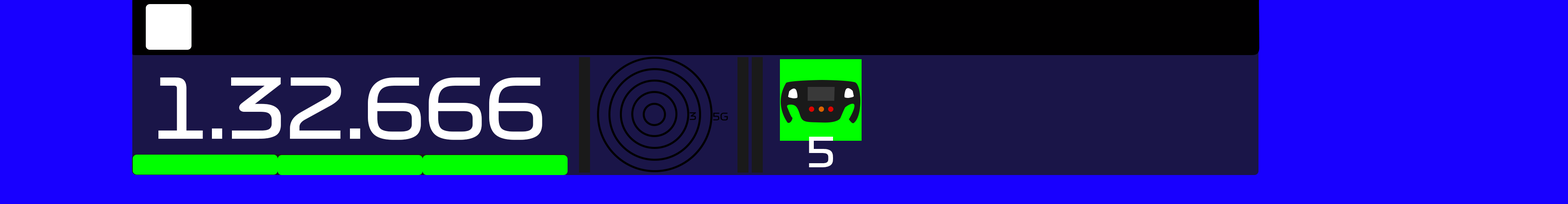
<style>
.page{position:relative;width:1568px;height:204px;background:#1800ff}
.page>*{position:absolute;margin:0}
.t1{font:81.7px "Formula1-Display-Regular";color:#ffffff}
.t2{font:10.2px "Formula1-Display-Regular";color:#010001}
.t3{font:40.8px "Formula1-Display-Regular";color:#ffffff}
</style>
<div class="page">
<p class="t1" style="left:158px;top:77px;width:384px;height:63px">1.32.666</p>
<p class="t2" style="left:690px;top:112px;width:6px;height:8px">3</p>
<p class="t2" style="left:713px;top:113px;width:15px;height:8px">5G</p>
<p class="t3" style="left:809px;top:137px;width:24px;height:30px">5</p>
</div>
